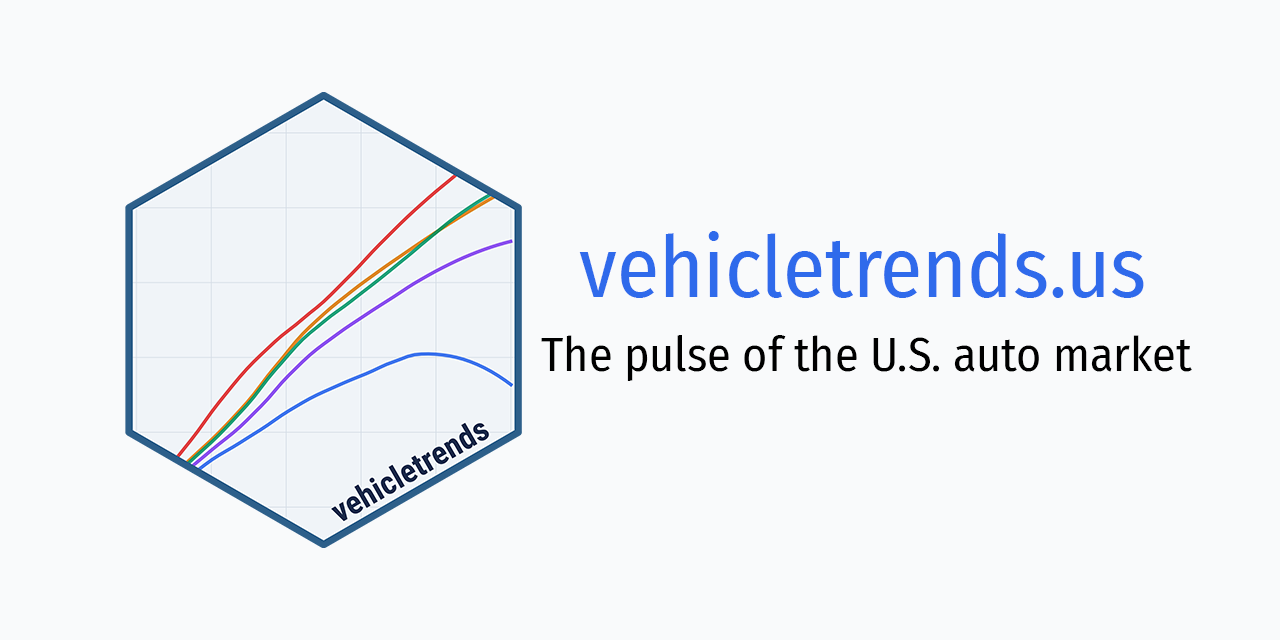
<style>
.page{position:relative;width:1280px;height:640px;background:#f9fafb}
.page>*{position:absolute;margin:0}
.t1{font:85px "FiraSansCondensed-Regular";color:#2f6aeb}
.t2{font:48px "FiraSansCondensed-Regular";color:#000000}
</style>
<div class="page">
<p class="t1" style="left:579px;top:231px;width:565px;height:67px">vehicletrends.us</p>
<p class="t2" style="left:541px;top:335px;width:651px;height:46px">The pulse of the U.S. auto market</p>
</div>
